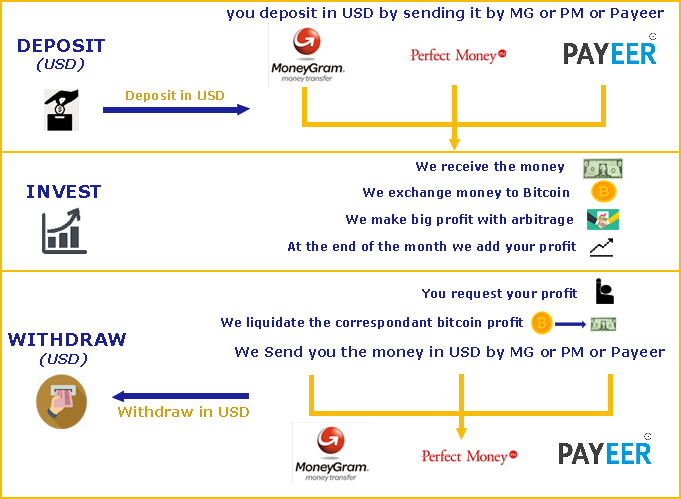
<style>
.page{position:relative;width:681px;height:499px;background:#ffffff}
.page>*{position:absolute;margin:0}
.t1{font:14px "Verdana-Bold";color:#1b2199}
.t2{font:18px "Verdana-Bold";color:#1b2199}
.t3{font:14px "Verdana-BoldItalic";color:#1b2199}
.t4{font:12px "Verdana-Bold";color:#cea321}
.t5{font:12px "Verdana-Bold";color:#1b2199}
.t6{font:14px "Verdana-Bold";color:#cf9f0f}
</style>
<div class="page">
<p class="t1" style="left:227px;top:7px;width:437px;height:14px">you deposit in USD by sending it by MG or PM or Payeer</p>
<p class="t2" style="left:18px;top:39px;width:87px;height:13px">DEPOSIT</p>
<p class="t3" style="left:37px;top:58px;width:47px;height:14px">(USD)</p>
<p class="t4" style="left:126px;top:90px;width:98px;height:12px">Deposit in USD</p>
<p class="t5" style="left:416px;top:161px;width:148px;height:12px">We receive the money</p>
<p class="t2" style="left:27px;top:185px;width:74px;height:13px">INVEST</p>
<p class="t5" style="left:363px;top:187px;width:206px;height:12px">We exchange money to Bitcoin</p>
<p class="t5" style="left:346px;top:214px;width:227px;height:12px">We make big profit with arbitrage</p>
<p class="t5" style="left:288px;top:241px;width:288px;height:12px">At the end of the month we add your profit</p>
<p class="t5" style="left:422px;top:288px;width:155px;height:12px">You request your profit</p>
<p class="t5" style="left:221px;top:317px;width:302px;height:12px">We liquidate the correspondant bitcoin profit</p>
<p class="t2" style="left:8px;top:333px;width:118px;height:13px">WITHDRAW</p>
<p class="t3" style="left:40px;top:353px;width:47px;height:14px">(USD)</p>
<p class="t1" style="left:235px;top:346px;width:430px;height:14px">We Send you the money in USD by MG or PM or Payeer</p>
<p class="t6" style="left:118px;top:406px;width:131px;height:11px">Withdraw in USD</p>
</div>
